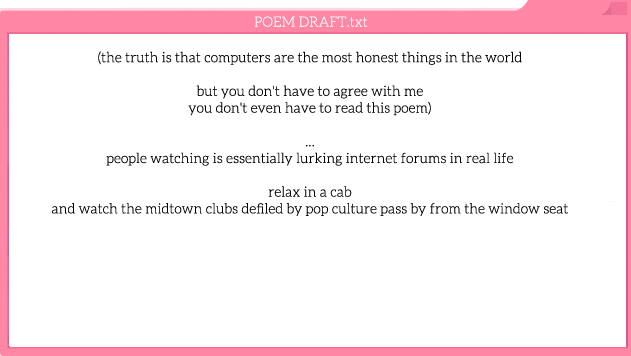
<style>
.page{position:relative;width:631px;height:356px;background:#ffffff}
.page>*{position:absolute;margin:0}
.t1{font:14px "Aleo-Light";color:#ffffff}
.t2{font:14px "Aleo-Light";color:#000000}
</style>
<div class="page">
<p class="t1" style="left:254px;top:16px;width:114px;height:11px">POEM DRAFT.txt</p>
<p class="t2" style="left:52px;top:51px;width:516px;height:165px;text-align:center">(the truth is that computers are the most honest things in the world<br><br>but you don't have to agree with me <br>you don't even have to read this poem)<br><br>...<br>people watching is essentially lurking internet forums in real life<br><br>relax in a cab<br>and watch the midtown clubs defiled by pop culture pass by from the window seat</p>
</div>
